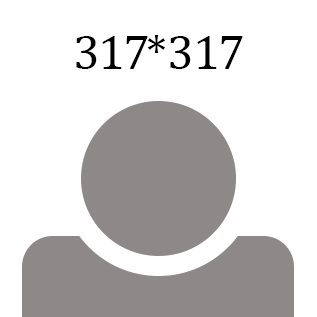
<style>
.page{position:relative;width:317px;height:317px;background:#ffffff}
.page>*{position:absolute;margin:0}
.t1{font:49px "CambriaMath";letter-spacing:-0.04em;color:#000000}
</style>
<div class="page">
<p class="t1" style="left:76px;top:35px;width:167px;height:34px">317*317</p>
</div>
